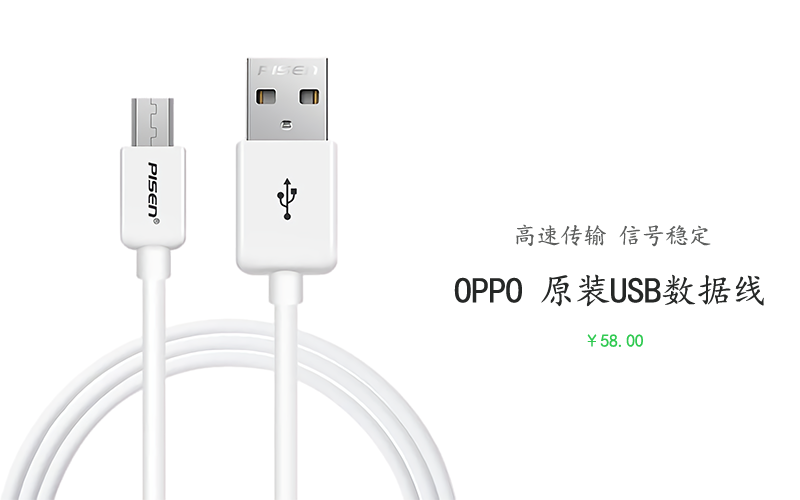
<style>
.page{position:relative;width:800px;height:500px;background:#ffffff}
.page>*{position:absolute;margin:0}
.t1{font:24px "KaiTi";letter-spacing:-0.025em;color:#5c5d5c}
.t2{font:36px "KaiTi";letter-spacing:-0.025em;color:#252726}
.t3{font:18px "KaiTi";letter-spacing:-0.025em;color:#2fc950}
</style>
<div class="page">
<p class="t1" style="left:516px;top:224px;width:195px;height:23px">高速传输 信号稳定</p>
<p class="t2" style="left:454px;top:274px;width:310px;height:33px">OPPO 原装USB数据线</p>
<p class="t3" style="left:587px;top:334px;width:56px;height:13px">￥58.00</p>
</div>
